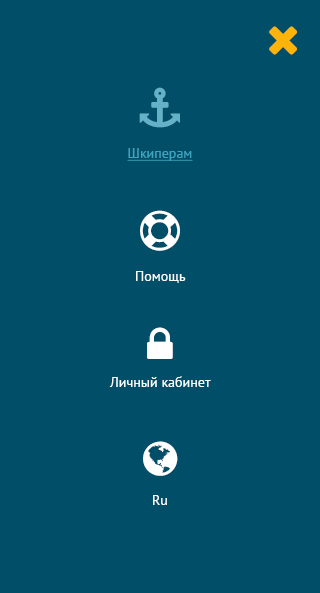
<style>
.page{position:relative;width:320px;height:593px;background:#014e69}
.page>*{position:absolute;margin:0}
.t1{font:14px "PTSans-Regular";color:#3fa5be;text-decoration:underline}
.t2{font:14px "PTSans-Regular";color:#ffffff}
</style>
<div class="page">
<p class="t1" style="left:127px;top:148px;width:66px;height:13px">Шкиперам</p>
<p class="t2" style="left:136px;top:271px;width:50px;height:12px">Помощь</p>
<p class="t2" style="left:109px;top:376px;width:102px;height:11px">Личный кабинет</p>
<p class="t2" style="left:153px;top:495px;width:14px;height:10px">Ru</p>
</div>
